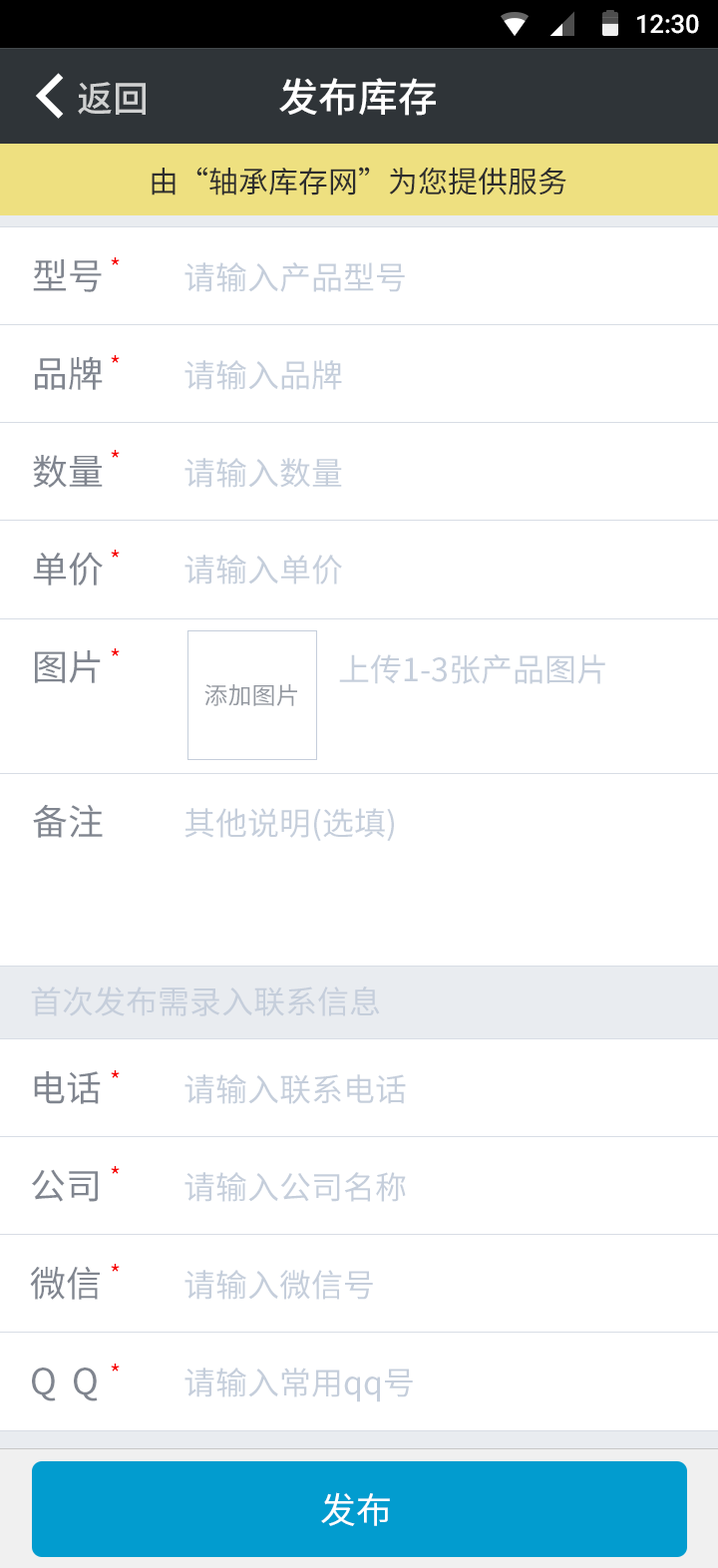
<style>
.page{position:relative;width:718px;height:1568px;background:#ffffff}
.page>*{position:absolute;margin:0}
.t1{font:39.9px "SourceHanSansCN-Medium";color:#ffffff}
.t2{font:35.9px "SourceHanSansCN-Medium";color:#d0d1d1}
.t3{font:29.9px "SourceHanSansCN-Regular";color:#2e2e2e}
.t4{font:23.9px "SourceHanSansCN-Regular";color:#f70101}
.t5{font:35.9px "SourceHanSansCN-Regular";color:#80858f}
.t6{font:31.9px "SourceHanSansCN-Regular";color:#c5cedb}
.t7{font:23.9px "SourceHanSansCN-Regular";color:#9398a0}
.t8{font:35.9px "SourceHanSansCN-Regular";color:#ffffff}
</style>
<div class="page">
<p class="t1" style="left:279px;top:78px;width:157px;height:38px">发布库存</p>
<p class="t2" style="left:78px;top:82px;width:68px;height:33px">返回</p>
<p class="t3" style="left:152px;top:167px;width:415px;height:29px">由“轴承库存网”为您提供服务</p>
<p class="t4" style="left:111px;top:257px;width:9px;height:8px">*</p>
<p class="t5" style="left:33px;top:259px;width:69px;height:33px">型号</p>
<p class="t6" style="left:185px;top:262px;width:220px;height:30px">请输入产品型号</p>
<p class="t5" style="left:35px;top:356px;width:68px;height:34px">品牌</p>
<p class="t4" style="left:111px;top:355px;width:9px;height:8px">*</p>
<p class="t6" style="left:185px;top:360px;width:157px;height:30px">请输入品牌</p>
<p class="t4" style="left:111px;top:450px;width:9px;height:8px">*</p>
<p class="t5" style="left:33px;top:455px;width:70px;height:33px">数量</p>
<p class="t6" style="left:185px;top:458px;width:157px;height:30px">请输入数量</p>
<p class="t5" style="left:33px;top:552px;width:70px;height:34px">单价</p>
<p class="t4" style="left:111px;top:550px;width:9px;height:8px">*</p>
<p class="t6" style="left:185px;top:555px;width:157px;height:30px">请输入单价</p>
<p class="t5" style="left:35px;top:650px;width:66px;height:33px">图片</p>
<p class="t4" style="left:111px;top:648px;width:9px;height:8px">*</p>
<p class="t6" style="left:339px;top:654px;width:266px;height:30px">上传1-3张产品图片</p>
<p class="t7" style="left:204px;top:684px;width:93px;height:22px">添加图片</p>
<p class="t5" style="left:33px;top:804px;width:70px;height:34px">备注</p>
<p class="t6" style="left:185px;top:808px;width:209px;height:34px">其他说明(选填)</p>
<p class="t6" style="left:31px;top:986px;width:349px;height:30px">首次发布需录入联系信息</p>
<p class="t5" style="left:34px;top:1071px;width:67px;height:33px">电话</p>
<p class="t4" style="left:111px;top:1070px;width:9px;height:8px">*</p>
<p class="t6" style="left:185px;top:1074px;width:221px;height:30px">请输入联系电话</p>
<p class="t5" style="left:32px;top:1169px;width:66px;height:33px">公司</p>
<p class="t4" style="left:111px;top:1166px;width:9px;height:8px">*</p>
<p class="t6" style="left:185px;top:1172px;width:221px;height:30px">请输入公司名称</p>
<p class="t5" style="left:30px;top:1266px;width:70px;height:34px">微信</p>
<p class="t4" style="left:111px;top:1264px;width:9px;height:8px">*</p>
<p class="t6" style="left:185px;top:1270px;width:188px;height:30px">请输入微信号</p>
<p class="t5" style="left:32px;top:1368px;width:66px;height:33px">Q  Q</p>
<p class="t4" style="left:111px;top:1364px;width:9px;height:8px">*</p>
<p class="t6" style="left:185px;top:1368px;width:228px;height:34px">请输入常用qq号</p>
<p class="t8" style="left:321px;top:1492px;width:69px;height:34px">发布</p>
</div>
